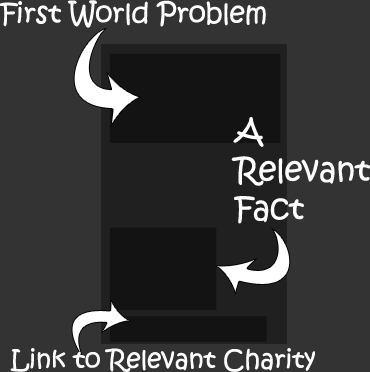
<style>
.page{position:relative;width:370px;height:372px;background:#333333}
.page>*{position:absolute;margin:0}
.t1{font:27.8px "KristenITC-Regular";letter-spacing:-0.009em;color:#ffffff}
.t2{font:32.1px "KristenITC-Regular";letter-spacing:-0.009em;color:#ffffff}
.t3{font:25.7px "KristenITC-Regular";letter-spacing:-0.009em;color:#ffffff}
</style>
<div class="page">
<p class="t1" style="left:0px;top:0px;width:266px;height:28px">First World Problem</p>
<p class="t2" style="left:231px;top:116px;width:139px;height:108px;text-align:justify">A<br>Relevant<br>Fact</p>
<p class="t3" style="left:10px;top:348px;width:305px;height:24px">Link to Relevant Charity</p>
</div>
